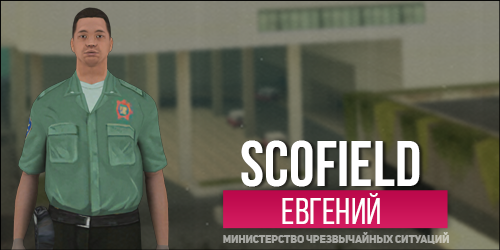
<style>
.page{position:relative;width:500px;height:250px}
.page>*{position:absolute;margin:0}
.t1{font:64.4px "BebasNeueBold";color:#ffffff}
.t2{font:36.8px "BebasNeueRegular";color:#ffffff}
.t3{font:10.6px "UniSansHeavyCaps";color:#a6a6a2}
</style>
<div class="page">
<p class="t1" style="left:241px;top:140px;width:179px;height:47px">Scofield</p>
<p class="t2" style="left:282px;top:193px;width:98px;height:31px">ЕВГЕНИЙ</p>
<p class="t3" style="left:223px;top:232px;width:226px;height:12px">МИНИСТЕРСТВО ЧРЕЗВЫЧАЙНЫХ СИТУАЦИЙ</p>
</div>
